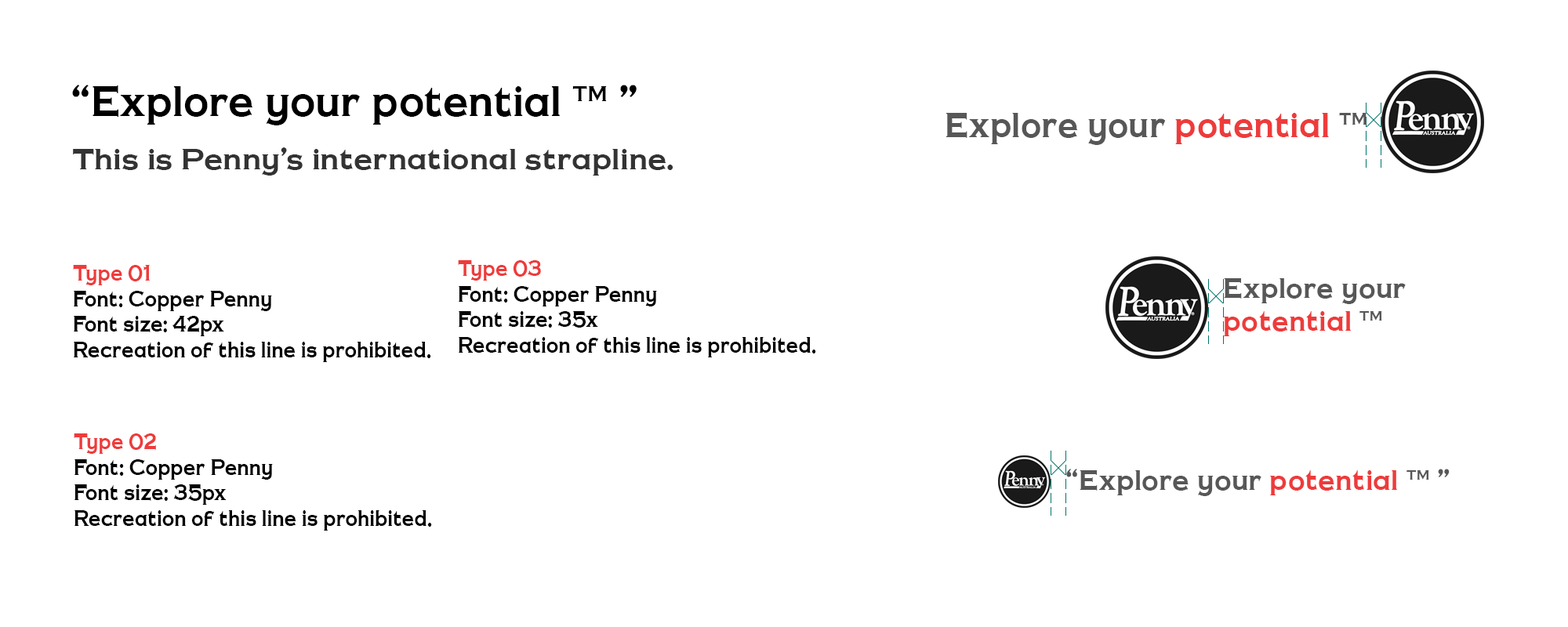
<style>
.page{position:relative;width:1568px;height:627px;background:#ffffff}
.page>*{position:absolute;margin:0}
.t1{font:40.9px "CopperPennyDTPNormal";color:#000000;scale:0.91 1}
.t2{font:33.5px "CopperPennyDTPNormal";color:#575757;scale:0.91 1}
.t3{font:33.5px "CopperPennyDTPNormal";color:#ee3b3b;scale:0.91 1}
.t4{font:28.2px "CopperPennyDTPNormal";color:#333333}
.t5{font:21.2px "CopperPennyDTPNormal";color:#000000;scale:0.84 1}
.t6{font:21.2px "CopperPennyDTPNormal";color:#ee3b3b;scale:0.84 1}
.t7{font:27.8px "CopperPennyDTPNormal";color:#575757;scale:0.91 1}
.t8{font:27.8px "CopperPennyDTPNormal";color:#ee3b3b;scale:0.91 1}
</style>
<div class="page">
<p class="t1" style="left:72px;top:85px;width:565px;height:40px">“Explore your potential ™ ”</p>
<p class="t2" style="left:946px;top:113px;width:421px;height:32px">Explore your <span class="t3">potential</span> ™</p>
<p class="t4" style="left:73px;top:147px;width:600px;height:29px">This is Penny’s international strapline.</p>
<p class="t5" style="left:73px;top:265px;width:358px;height:97px"><span class="t6">Type 01<br></span>Font: Copper Penny<br>Font size: 42px<br>Recreation of this line is prohibited.</p>
<p class="t5" style="left:458px;top:260px;width:358px;height:98px"><span class="t6">Type 03<br></span>Font: Copper Penny<br>Font size: 35x<br>Recreation of this line is prohibited.</p>
<p class="t7" style="left:1224px;top:278px;width:182px;height:58px">Explore your <br><span class="t8">potential</span> ™</p>
<p class="t5" style="left:74px;top:434px;width:358px;height:97px"><span class="t6">Type 02<br></span>Font: Copper Penny<br>Font size: 35px<br>Recreation of this line is prohibited.</p>
<p class="t7" style="left:1066px;top:469px;width:384px;height:27px">“Explore your <span class="t8">potential</span> ™ ”</p>
</div>
